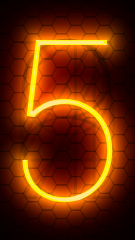
<style>
.page{position:relative;width:135px;height:240px}
.page>*{position:absolute;margin:0}
.t1{font:220px "Inter-Thin"}
</style>
<div class="page">
<p class="t1" style="left:22px;top:40px;width:91px;height:163px">5</p>
</div>
